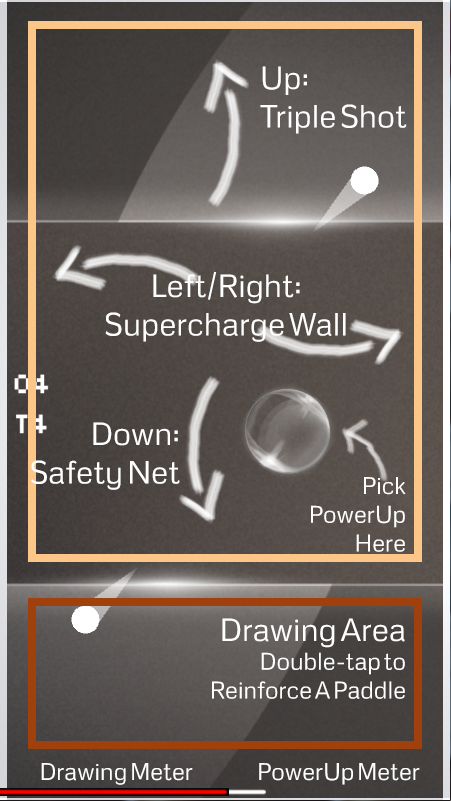
<style>
.page{position:relative;width:451px;height:801px}
.page>*{position:absolute;margin:0}
.t1{font:32px "Metrophobic";color:#ffffff}
.t2{font:24px "Metrophobic";color:#ffffff}
</style>
<div class="page">
<p class="t1" style="left:260px;top:66px;width:147px;height:68px">Up:<br>Triple Shot</p>
<p class="t1" style="left:105px;top:271px;width:241px;height:71px;text-align:center">Left/Right:<br>Supercharge Wall</p>
<p class="t1" style="left:31px;top:422px;width:149px;height:68px;text-align:right">Down:<br>Safety Net</p>
<p class="t2" style="left:311px;top:477px;width:95px;height:75px;text-align:right">Pick<br>PowerUp<br>Here</p>
<p class="t2" style="left:212px;top:618px;width:193px;height:81px;text-align:right"><span class="t1">Drawing Area<br></span>Double-tap to<br>Reinforce A Paddle</p>
<p class="t2" style="left:41px;top:763px;width:152px;height:22px">Drawing Meter</p>
<p class="t2" style="left:259px;top:763px;width:161px;height:22px">PowerUp Meter</p>
</div>
